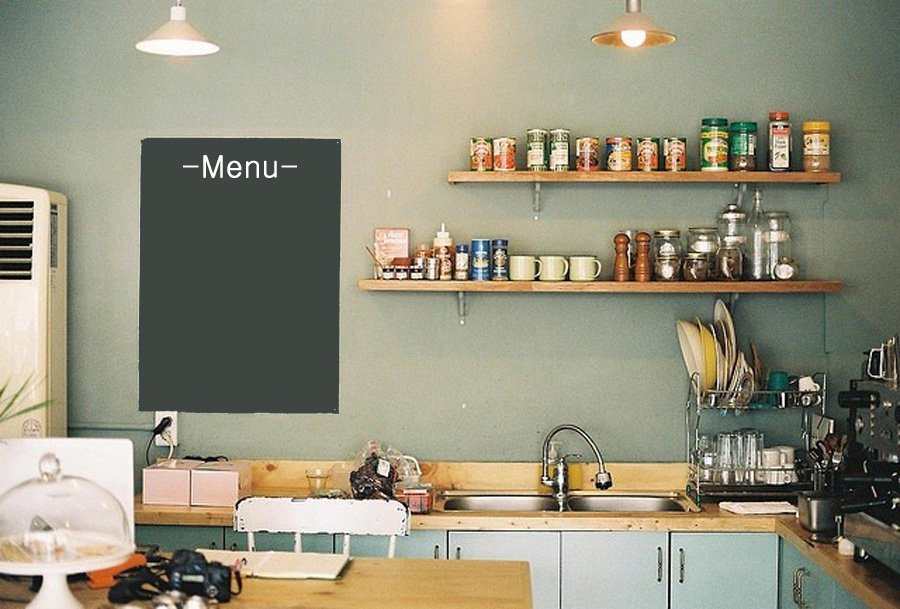
<style>
.page{position:relative;width:900px;height:609px}
.page>*{position:absolute;margin:0}
.t1{font:30px "Gulim";color:#ffffff;font-weight:bold}
.t2{font:30px "Gulim";color:#3e4541}
</style>
<div class="page">
<p class="t1" style="left:183px;top:155px;width:114px;height:23px">-Menu<span class="t2">menu-</span></p>
</div>
